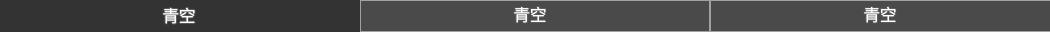
<style>
.page{position:relative;width:1050px;height:32px;background:#4a4a4a}
.page>*{position:absolute;margin:0}
.t1{font:16.7px "SourceHanSansSC-Normal";color:#ffffff}
</style>
<div class="page">
<p class="t1" style="left:514px;top:6px;width:32px;height:17px">青空</p>
<p class="t1" style="left:864px;top:6px;width:32px;height:17px">青空</p>
<p class="t1" style="left:163px;top:7px;width:32px;height:17px">青空</p>
</div>
